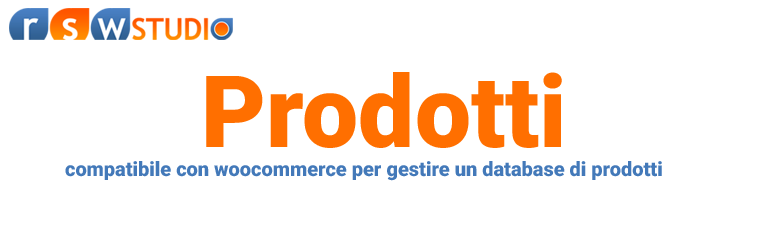
<style>
.page{position:relative;width:772px;height:250px;background:#ffffff}
.page>*{position:absolute;margin:0}
.t1{font:100px "Roboto-Regular";color:#ff6f00}
.t2{font:20px "Roboto-Regular";color:#4379b9}
</style>
<div class="page">
<p class="t1" style="left:206px;top:72px;width:356px;height:76px">Prodotti</p>
<p class="t2" style="left:65px;top:161px;width:597px;height:20px">compatibile con woocommerce per gestire un database di prodotti</p>
</div>
